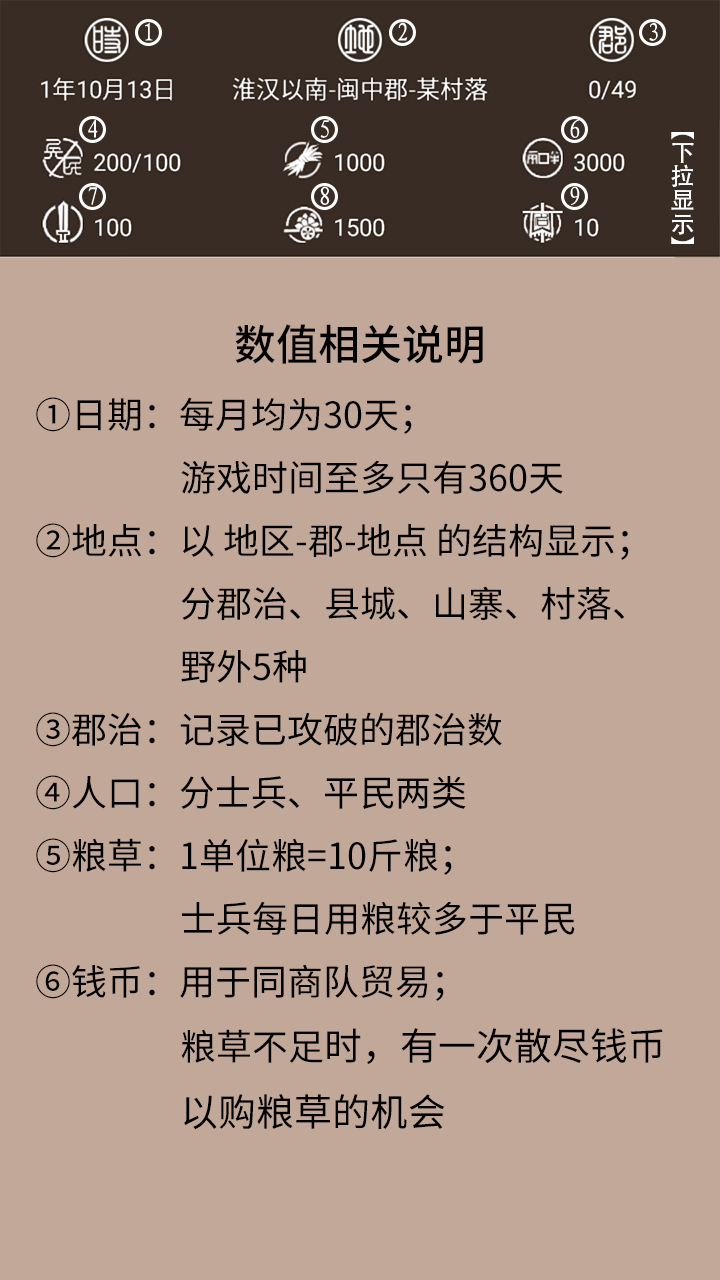
<style>
.page{position:relative;width:720px;height:1280px;background:#c2a899}
.page>*{position:absolute;margin:0}
.t1{font:36px "NotoSansHans-Regular";color:#000000}
.t2{font:42px "NotoSansHans-Medium";color:#000000}
.t3{font:38px "NotoSansHans-Regular";color:#000000}
</style>
<div class="page">
<p class="t1" style="left:36px;top:324px;width:627px;height:806px;text-align:center"><span class="t2">数值相关说明<br></span>①日期：每月均为30天；<br>                  游戏时间至多只有360天<br>②地点：以 地区-郡-地点 的结构显示；               <br>                  分郡治、县城、山寨、村落、                     <br>                  野外5种<br>③郡治：记录已攻破的郡治数<br>④人口：分士兵、平民两类<br>⑤粮草：1单位粮=10斤粮；<br>                  士兵每日用粮较多于平民<br>⑥钱币：用于同商队贸易；<br>                  粮草不足<span class="t3">时，有一次散尽钱币                                    <br>                  以购粮草的机会</span></p>
</div>
